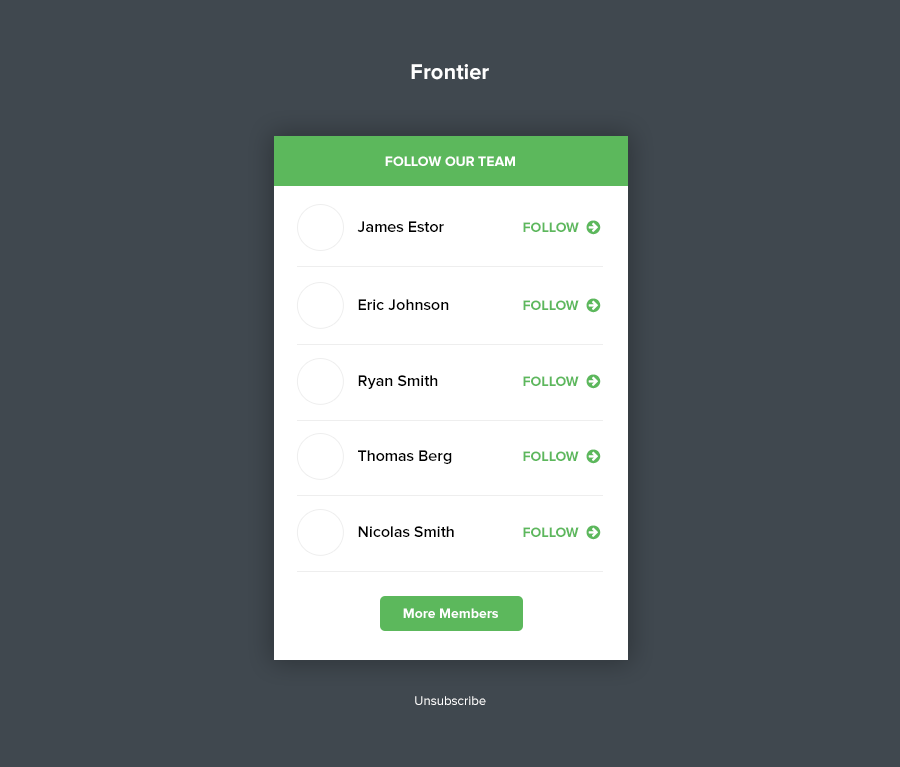
<style>
.page{position:relative;width:900px;height:767px;background:#40484f}
.page>*{position:absolute;margin:0}
.t1{font:22px "ProximaNova-Bold";color:#ffffff}
.t2{font:14px "ProximaNova-Bold";color:#ffffff;text-transform:uppercase}
.t3{font:16px "ProximaNova-Semibold";color:#000000}
.t4{font:14px "ProximaNova-Bold";color:#5cb85c}
.t5{font:15.9px "ProximaNova-Semibold";color:#000000}
.t6{font:14px "ProximaNova-Bold";color:#ffffff}
.t7{font:13.1px "ProximaNova-Regular";color:#ffffff}
</style>
<div class="page">
<p class="t1" style="left:411px;top:64px;width:78px;height:16px">Frontier</p>
<p class="t2" style="left:385px;top:156px;width:130px;height:10px">follow our team</p>
<p class="t3" style="left:357px;top:221px;width:87px;height:11px">James Estor</p>
<p class="t4" style="left:523px;top:222px;width:56px;height:10px">FOLLOW</p>
<p class="t5" style="left:358px;top:299px;width:91px;height:11px">Eric Johnson</p>
<p class="t4" style="left:523px;top:300px;width:56px;height:10px">FOLLOW</p>
<p class="t5" style="left:358px;top:375px;width:80px;height:14px">Ryan Smith</p>
<p class="t4" style="left:523px;top:376px;width:56px;height:10px">FOLLOW</p>
<p class="t5" style="left:358px;top:450px;width:94px;height:14px">Thomas Berg</p>
<p class="t4" style="left:523px;top:451px;width:56px;height:10px">FOLLOW</p>
<p class="t5" style="left:358px;top:526px;width:96px;height:11px">Nicolas Smith</p>
<p class="t4" style="left:523px;top:527px;width:56px;height:10px">FOLLOW</p>
<p class="t6" style="left:403px;top:608px;width:95px;height:10px">More Members</p>
<p class="t7" style="left:415px;top:696px;width:71px;height:9px">Unsubscribe</p>
</div>
